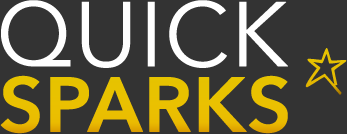
<style>
.page{position:relative;width:347px;height:134px;background:#333333}
.page>*{position:absolute;margin:0}
.t1{font:90.6px "AvenirNextLTPro-Regular";letter-spacing:-0.01em;color:#ffffff;font-weight:bold}
.t2{font:71.4px "Simply*Glamorous";letter-spacing:-0.01em;color:#e6bf00;font-weight:bold}
.t3{font:76.8px "AvenirNextLTPro-Demi";letter-spacing:-0.01em;color:#e8c101;font-weight:bold}
</style>
<div class="page">
<p class="t1" style="left:1px;top:0px;width:287px;height:68px">QUICK</p>
<p class="t2" style="left:305px;top:48px;width:42px;height:47px">*</p>
<p class="t3" style="left:0px;top:75px;width:288px;height:59px">SPARKS</p>
</div>
